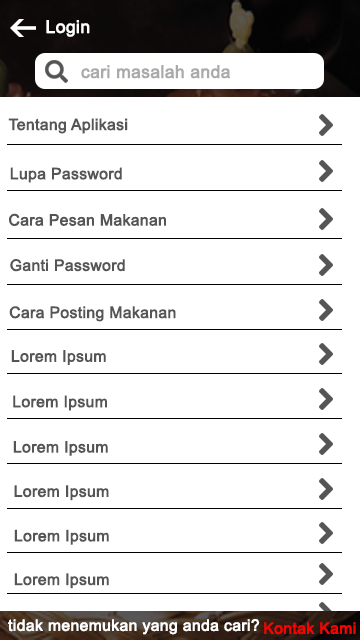
<style>
.page{position:relative;width:360px;height:640px;background:#ffffff}
.page>*{position:absolute;margin:0}
.t1{font:17.4px "ArialMT";color:#ffffff;font-weight:bold}
.t2{font:17.4px "ArialMT";color:#aaaaaa;font-weight:bold}
.t3{font:15.6px "ArialMT";color:#555555;font-weight:bold}
.t4{font:15.6px "ArialMT";color:#ffffff;font-weight:bold}
.t5{font:15.6px "ArialMT";color:#fe0000;font-weight:bold}
</style>
<div class="page">
<p class="t1" style="left:46px;top:20px;width:44px;height:17px">Login</p>
<p class="t2" style="left:81px;top:65px;width:149px;height:14px">cari masalah anda</p>
<p class="t3" style="left:8px;top:118px;width:120px;height:16px">Tentang Aplikasi</p>
<p class="t3" style="left:10px;top:167px;width:112px;height:16px">Lupa Password</p>
<p class="t3" style="left:9px;top:213px;width:157px;height:13px">Cara Pesan Makanan</p>
<p class="t3" style="left:10px;top:259px;width:115px;height:13px">Ganti Password</p>
<p class="t3" style="left:9px;top:306px;width:167px;height:16px">Cara Posting Makanan</p>
<p class="t3" style="left:11px;top:350px;width:95px;height:15px">Lorem Ipsum</p>
<p class="t3" style="left:13px;top:395px;width:94px;height:16px">Lorem Ipsum</p>
<p class="t3" style="left:13px;top:441px;width:95px;height:15px">Lorem Ipsum</p>
<p class="t3" style="left:14px;top:485px;width:95px;height:16px">Lorem Ipsum</p>
<p class="t3" style="left:14px;top:529px;width:95px;height:16px">Lorem Ipsum</p>
<p class="t3" style="left:14px;top:573px;width:95px;height:16px">Lorem Ipsum</p>
<p class="t4" style="left:8px;top:619px;width:252px;height:16px">tidak menemukan yang anda cari?</p>
<p class="t5" style="left:264px;top:622px;width:92px;height:13px">Kontak Kami</p>
</div>
